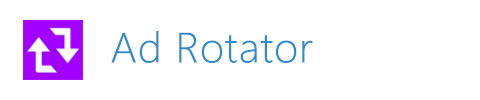
<style>
.page{position:relative;width:480px;height:100px;background:#ffffff}
.page>*{position:absolute;margin:0}
.t1{font:42.4px "SegoeUI-Light";letter-spacing:0.025em;color:#2e8bcc}
</style>
<div class="page">
<p class="t1" style="left:111px;top:31px;width:202px;height:32px">Ad Rotator</p>
</div>
